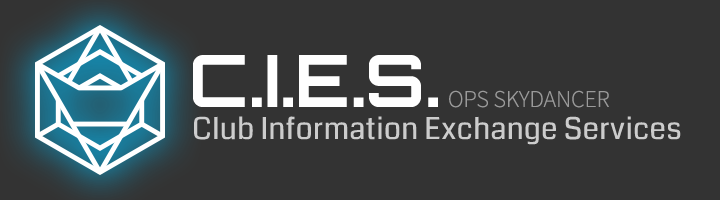
<style>
.page{position:relative;width:720px;height:200px;background:#333333}
.page>*{position:absolute;margin:0}
.t1{font:72px "Orbitron-Bold";color:#ffffff}
.t2{font:24px "SourceSansPro-Light";color:#9a9a9a}
.t3{font:30px "Coda-Regular";color:#cccccc}
</style>
<div class="page">
<p class="t1" style="left:193px;top:55px;width:245px;height:52px">C.I.E.S.</p>
<p class="t2" style="left:449px;top:90px;width:160px;height:18px">OPS SKYDANCER</p>
<p class="t3" style="left:194px;top:116px;width:487px;height:29px">Club Information Exchange Services</p>
</div>
